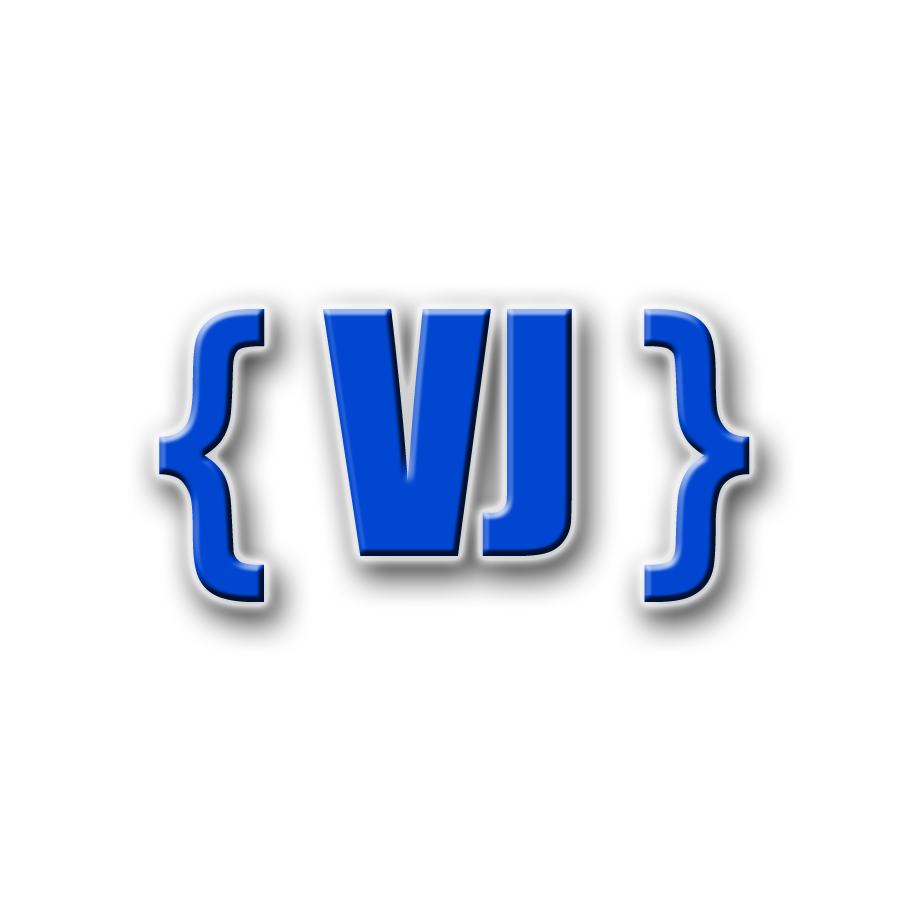
<style>
.page{position:relative;width:910px;height:910px;background:#ffffff}
.page>*{position:absolute;margin:0}
.t1{font:313.1px "Impact";color:#0146d1}
</style>
<div class="page">
<p class="t1" style="left:159px;top:309px;width:591px;height:293px">{ VJ }</p>
</div>
